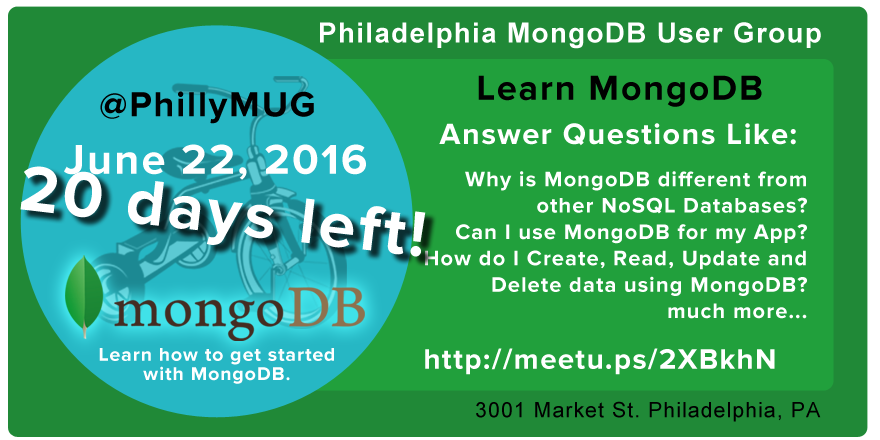
<style>
.page{position:relative;width:880px;height:440px;background:#21a03c}
.page>*{position:absolute;margin:0}
.t1{font:27.7px "Arial-BoldMT";letter-spacing:0.05em;color:#ffffff}
.t2{font:36px "ProximaNova-Bold";letter-spacing:0.05em;color:#000000}
.t3{font:30.6px "ProximaNova-Bold";letter-spacing:0.05em;color:#ffffff}
.t4{font:43.3px "ProximaNova-Bold";letter-spacing:0.05em;color:#ffffff}
.t5{font:66.2px "ProximaNova-Bold";letter-spacing:0.05em;color:#ffffff}
.t6{font:21.9px/26.4px "ProximaNova-Bold";letter-spacing:0.05em;color:#ffffff}
.t7{font:19.4px/19.4px "ProximaNova-Bold";letter-spacing:0.05em;color:#ffffff}
.t8{font:29.2px "ProximaNova-Bold";letter-spacing:0.05em;color:#ffffff}
.t9{font:21.3px "ArialMT";letter-spacing:0.05em;color:#000000}
</style>
<div class="page">
<p class="t1" style="left:320px;top:22px;width:501px;height:27px">Philadelphia MongoDB User Group</p>
<p class="t2" style="left:478px;top:75px;width:284px;height:32px">Learn MongoDB</p>
<p class="t2" style="left:100px;top:91px;width:214px;height:33px">@PhillyMUG</p>
<p class="t3" style="left:439px;top:123px;width:357px;height:23px">Answer Questions Like:</p>
<p class="t4" style="left:64px;top:144px;width:302px;height:36px">June 22, 2016</p>
<p class="t5" style="left:20px;top:166px;width:406px;height:91px;rotate:7deg">20 days left!</p>
<p class="t6" style="left:425px;top:171px;width:382px;height:148px;text-align:right">Why is MongoDB different from<br>other NoSQL Databases?<br>Can I use MongoDB for my App?<br>How do I Create, Read, Update and<br>Delete data using MongoDB?<br>much more...</p>
<p class="t7" style="left:99px;top:348px;width:235px;height:36px;text-align:center">Learn how to get started<br>with MongoDB.</p>
<p class="t8" style="left:425px;top:348px;width:350px;height:27px">http://meetu.ps/2XBkhN</p>
<p class="t9" style="left:476px;top:401px;width:345px;height:21px">3001 Market St. Philadelphia, PA</p>
</div>
